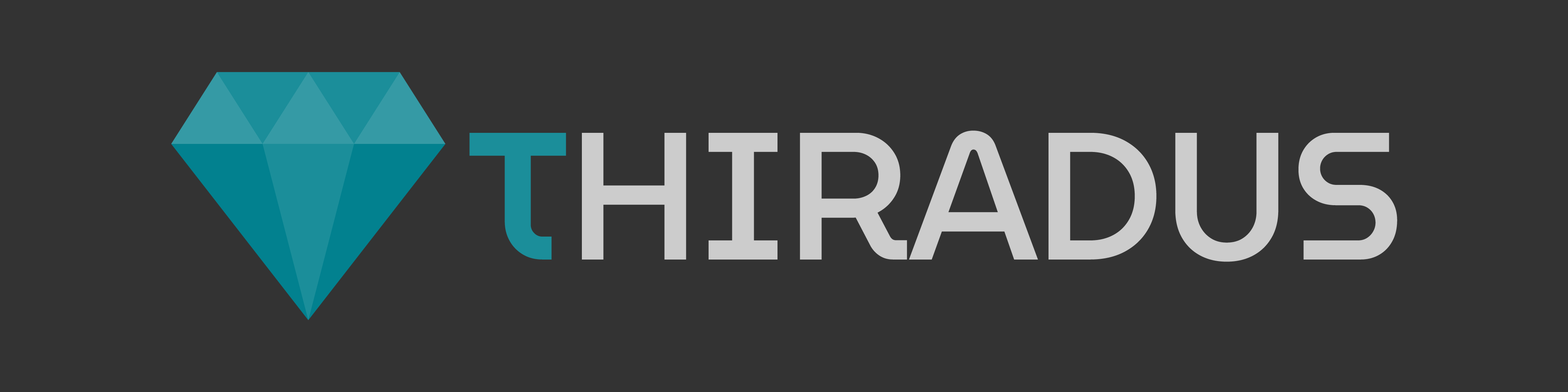
<style>
.page{position:relative;width:1568px;height:392px;background:#333333}
.page>*{position:absolute;margin:0}
.t1{font:258.4px "MuseoModerno-Medium";color:#cccccc;font-variant:small-caps}
.t2{font:258.4px "MuseoModerno-SemiBold";color:#1b8e9a;font-variant:small-caps}
</style>
<div class="page">
<p class="t1" style="left:469px;top:131px;width:928px;height:131px"><span class="t2">t</span>hiradus</p>
</div>
